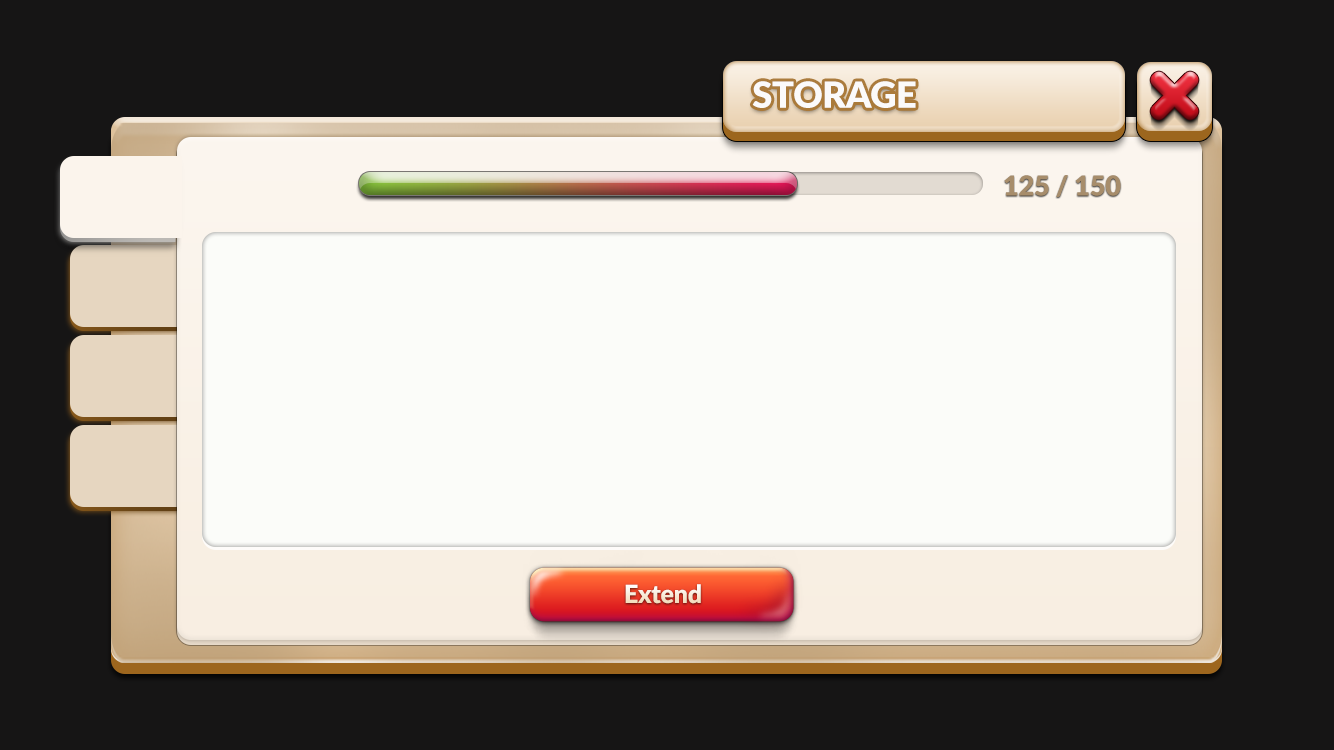
<style>
.page{position:relative;width:1334px;height:750px;background:#161515}
.page>*{position:absolute;margin:0}
.t1{font:36.2px "Lato-Black";letter-spacing:-0.01em;color:#fbfafa}
.t2{font:27.2px "Lato-Black";letter-spacing:-0.01em;color:#a78d6b}
.t3{font:24.9px "Lato-Black";letter-spacing:-0.01em}
</style>
<div class="page">
<p class="t1" style="left:752px;top:81px;width:164px;height:27px">STORAGE</p>
<p class="t2" style="left:1004px;top:175px;width:117px;height:22px">125 / 150</p>
<p class="t3" style="left:625px;top:584px;width:76px;height:20px">Extend</p>
</div>
